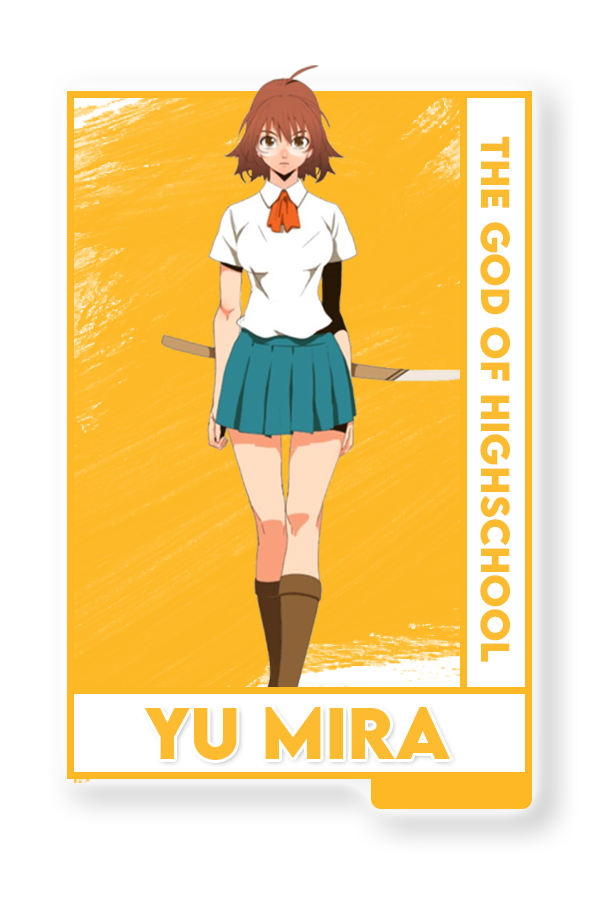
<style>
.page{position:relative;width:600px;height:900px;background:#ffffff}
.page>*{position:absolute;margin:0}
.t1{font:36px "LEMONMILK-Bold";color:#fdbc30}
.t2{font:65.2px "LEMONMILK-Bold";color:#fdbc30}
</style>
<div class="page">
<p class="t1" style="left:480px;top:136px;width:30px;height:526px;rotate:90deg">the god of highschool</p>
<p class="t2" style="left:144px;top:707px;width:306px;height:53px">Yu Mira</p>
</div>
